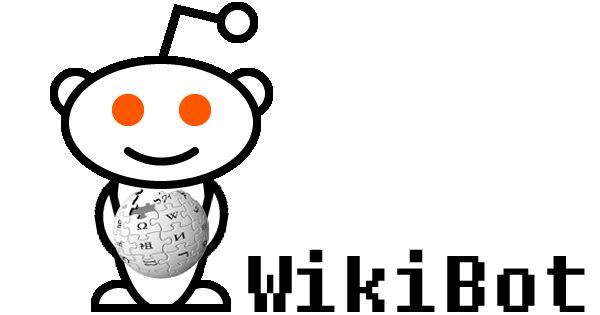
<style>
.page{position:relative;width:600px;height:315px;background:#ffffff}
.page>*{position:absolute;margin:0}
.t1{font:79.7px "Fixedsys";color:#000000}
</style>
<div class="page">
<p class="t1" style="left:248px;top:249px;width:337px;height:63px">WikiBot</p>
</div>
